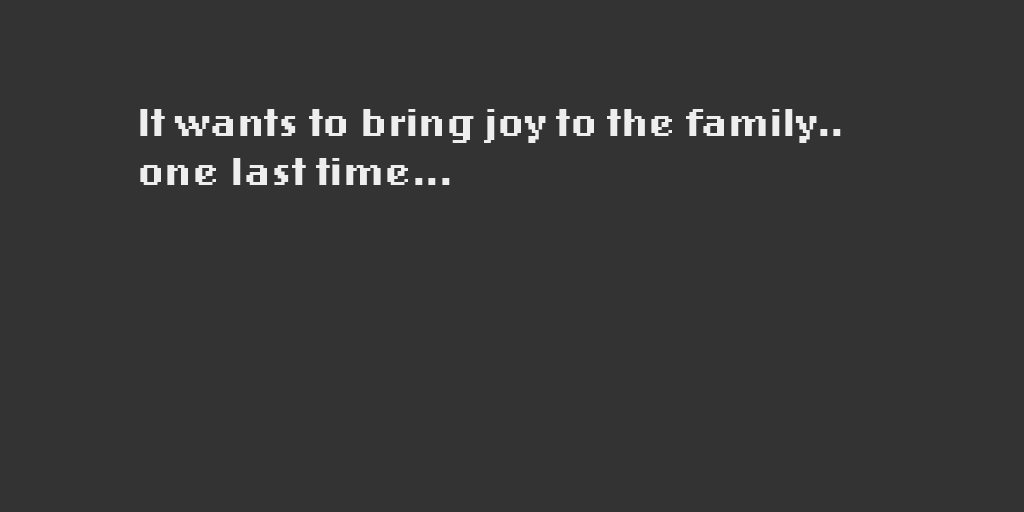
<style>
.page{position:relative;width:1024px;height:512px;background:#333333}
.page>*{position:absolute;margin:0}
.t1{font:41.2px "LoRes12OT-Bold";color:#eeeeee}
</style>
<div class="page">
<p class="t1" style="left:140px;top:109px;width:701px;height:76px">It wants to bring joy to the family..<br>one last time...</p>
</div>
